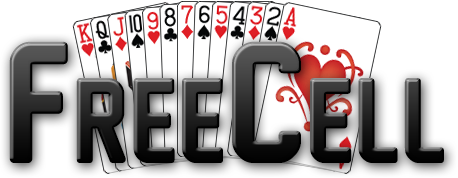
<style>
.page{position:relative;width:458px;height:178px;background:#ffffff}
.page>*{position:absolute;margin:0}
.t1{font:158px "Jetpackia";font-variant:small-caps}
</style>
<div class="page">
<p class="t1" style="left:9px;top:41px;width:435px;height:122px">FreeCell</p>
</div>
